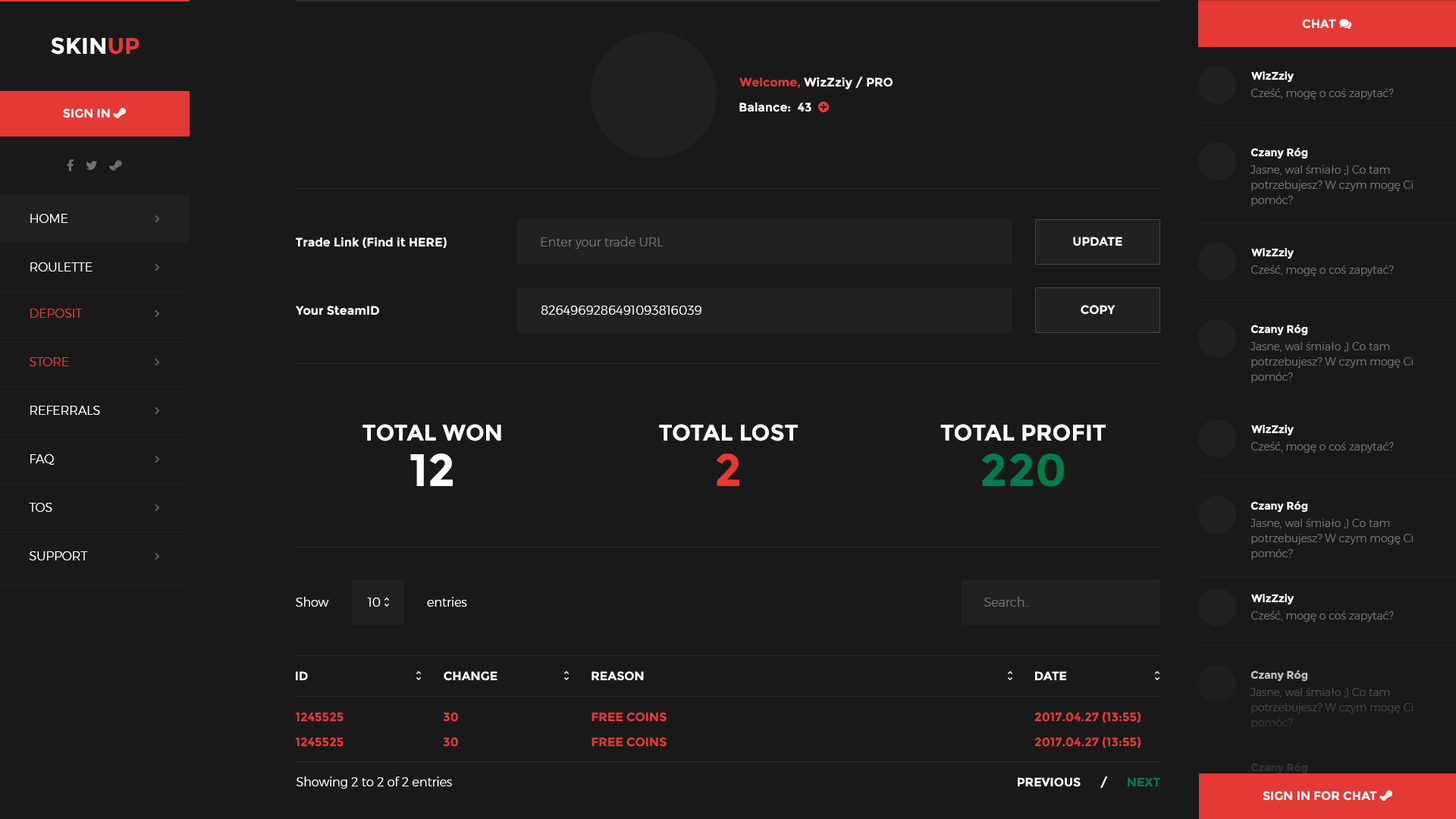
<style>
.page{position:relative;width:1456px;height:819px;background:#191919}
.page>*{position:absolute;margin:0}
.t1{font:22.7px "Montserrat-Bold";color:#fefefe}
.t2{font:22.7px "Montserrat-Bold";color:#e53935}
.t3{font:12.1px "Montserrat-Bold";color:#fefefe}
.t4{font:12.1px "Montserrat-Bold";color:#e53935}
.t5{font:10.7px "Montserrat-Bold";color:#fefefe}
.t6{font:10.7px "Montserrat-Light";color:#717171}
.t7{font:10.7px/15.2px "Montserrat-Light";color:#717171}
.t8{font:12.1px "Montserrat-Light";color:#fefefe}
.t9{font:12.1px "Montserrat-Light";color:#717171}
.t10{font:12.1px "Montserrat-Light";color:#e53935}
.t11{font:12.1px "Montserrat-Light";color:#ffffff}
.t12{font:22.7px/45.5px "Montserrat-Bold";color:#fefefe}
.t13{font:45.5px/45.5px "Montserrat-Bold";color:#fefefe}
.t14{font:45.5px/45.5px "Montserrat-Bold";color:#e53935}
.t15{font:45.5px/45.5px "Montserrat-Bold";color:#017c4c}
.t16{font:12.1px "Montserrat-Bold";color:#ffffff}
.t17{font:10.7px "Montserrat-Bold";color:#bfbfbf}
.t18{font:10.7px/15.2px "Montserrat-Light";color:#444444}
.t19{font:10.7px "Montserrat-Bold";color:#323232}
.t20{font:12.1px "Montserrat-Bold";color:#017c4c}
</style>
<div class="page">
<p class="t1" style="left:51px;top:37px;width:89px;height:18px">SKIN<span class="t2">UP</span></p>
<p class="t3" style="left:739px;top:77px;width:154px;height:12px"><span class="t4">Welcome,</span> WizZziy / PRO</p>
<p class="t5" style="left:1251px;top:71px;width:43px;height:12px">WizZziy</p>
<p class="t6" style="left:1251px;top:88px;width:143px;height:11px">Cześć, mogę o coś zapytać?</p>
<p class="t5" style="left:1250px;top:147px;width:58px;height:12px">Czany Róg</p>
<p class="t7" style="left:1250px;top:165px;width:164px;height:41px">Jasne, wal śmiało ;) Co tam <br>potrzebujesz? W czym mogę Ci<br>pomóc?</p>
<p class="t8" style="left:30px;top:214px;width:38px;height:9px">HOME</p>
<p class="t3" style="left:296px;top:237px;width:151px;height:11px">Trade Link (Find it HERE)</p>
<p class="t9" style="left:541px;top:237px;width:123px;height:12px">Enter your trade URL</p>
<p class="t3" style="left:1073px;top:237px;width:49px;height:9px">UPDATE</p>
<p class="t5" style="left:1251px;top:248px;width:43px;height:11px">WizZziy</p>
<p class="t8" style="left:30px;top:262px;width:63px;height:9px">ROULETTE</p>
<p class="t6" style="left:1251px;top:265px;width:143px;height:11px">Cześć, mogę o coś zapytać?</p>
<p class="t3" style="left:296px;top:306px;width:83px;height:9px">Your SteamID</p>
<p class="t8" style="left:541px;top:306px;width:160px;height:9px">8264969286491093816039</p>
<p class="t3" style="left:1081px;top:305px;width:34px;height:10px">COPY</p>
<p class="t10" style="left:30px;top:309px;width:53px;height:9px">DEPOSIT</p>
<p class="t5" style="left:1250px;top:324px;width:58px;height:12px">Czany Róg</p>
<p class="t7" style="left:1250px;top:341px;width:164px;height:42px">Jasne, wal śmiało ;) Co tam <br>potrzebujesz? W czym mogę Ci<br>pomóc?</p>
<p class="t10" style="left:29px;top:357px;width:40px;height:9px">STORE</p>
<p class="t11" style="left:30px;top:406px;width:70px;height:9px">REFERRALS</p>
<p class="t12" style="left:362px;top:424px;width:139px;height:62px;text-align:center">TOTAL WON<br><span class="t13">12</span></p>
<p class="t12" style="left:659px;top:424px;width:139px;height:62px;text-align:center">TOTAL LOST<br><span class="t14">2</span></p>
<p class="t12" style="left:940px;top:424px;width:166px;height:63px;text-align:center">TOTAL PROFIT<br><span class="t15">220</span></p>
<p class="t5" style="left:1251px;top:425px;width:43px;height:11px">WizZziy</p>
<p class="t6" style="left:1251px;top:441px;width:143px;height:12px">Cześć, mogę o coś zapytać?</p>
<p class="t11" style="left:30px;top:454px;width:25px;height:11px">FAQ</p>
<p class="t11" style="left:29px;top:503px;width:23px;height:9px">TOS</p>
<p class="t5" style="left:1250px;top:500px;width:58px;height:13px">Czany Róg</p>
<p class="t7" style="left:1250px;top:518px;width:164px;height:42px">Jasne, wal śmiało ;) Co tam <br>potrzebujesz? W czym mogę Ci<br>pomóc?</p>
<p class="t11" style="left:29px;top:551px;width:59px;height:9px">SUPPORT</p>
<p class="t5" style="left:1251px;top:594px;width:43px;height:11px">WizZziy</p>
<p class="t11" style="left:296px;top:597px;width:33px;height:10px">Show</p>
<p class="t11" style="left:367px;top:598px;width:14px;height:9px">10</p>
<p class="t11" style="left:427px;top:597px;width:40px;height:10px">entries</p>
<p class="t9" style="left:984px;top:597px;width:45px;height:10px">Search..</p>
<p class="t6" style="left:1251px;top:610px;width:143px;height:12px">Cześć, mogę o coś zapytać?</p>
<p class="t16" style="left:296px;top:671px;width:12px;height:9px">ID</p>
<p class="t16" style="left:444px;top:671px;width:53px;height:10px">CHANGE</p>
<p class="t16" style="left:591px;top:671px;width:53px;height:10px">REASON</p>
<p class="t16" style="left:1035px;top:671px;width:31px;height:9px">DATE</p>
<p class="t17" style="left:1250px;top:670px;width:58px;height:12px">Czany Róg</p>
<p class="t18" style="left:1250px;top:687px;width:164px;height:42px">Jasne, wal śmiało ;) Co tam <br>potrzebujesz? W czym mogę Ci<br>pomóc?</p>
<p class="t4" style="left:296px;top:712px;width:48px;height:10px">1245525</p>
<p class="t4" style="left:443px;top:712px;width:15px;height:10px">30</p>
<p class="t4" style="left:591px;top:712px;width:76px;height:10px">FREE COINS</p>
<p class="t4" style="left:1034px;top:712px;width:107px;height:11px">2017.04.27 (13:55)</p>
<p class="t4" style="left:296px;top:737px;width:48px;height:10px">1245525</p>
<p class="t4" style="left:443px;top:737px;width:15px;height:10px">30</p>
<p class="t4" style="left:591px;top:737px;width:76px;height:10px">FREE COINS</p>
<p class="t4" style="left:1034px;top:737px;width:107px;height:11px">2017.04.27 (13:55)</p>
<p class="t19" style="left:1250px;top:762px;width:58px;height:12px">Czany Róg</p>
<p class="t11" style="left:296px;top:777px;width:156px;height:12px">Showing 2 to 2 of 2 entries</p>
<p class="t16" style="left:1018px;top:777px;width:142px;height:11px">PREVIOUS      /      <span class="t20">NEXT</span></p>
</div>
